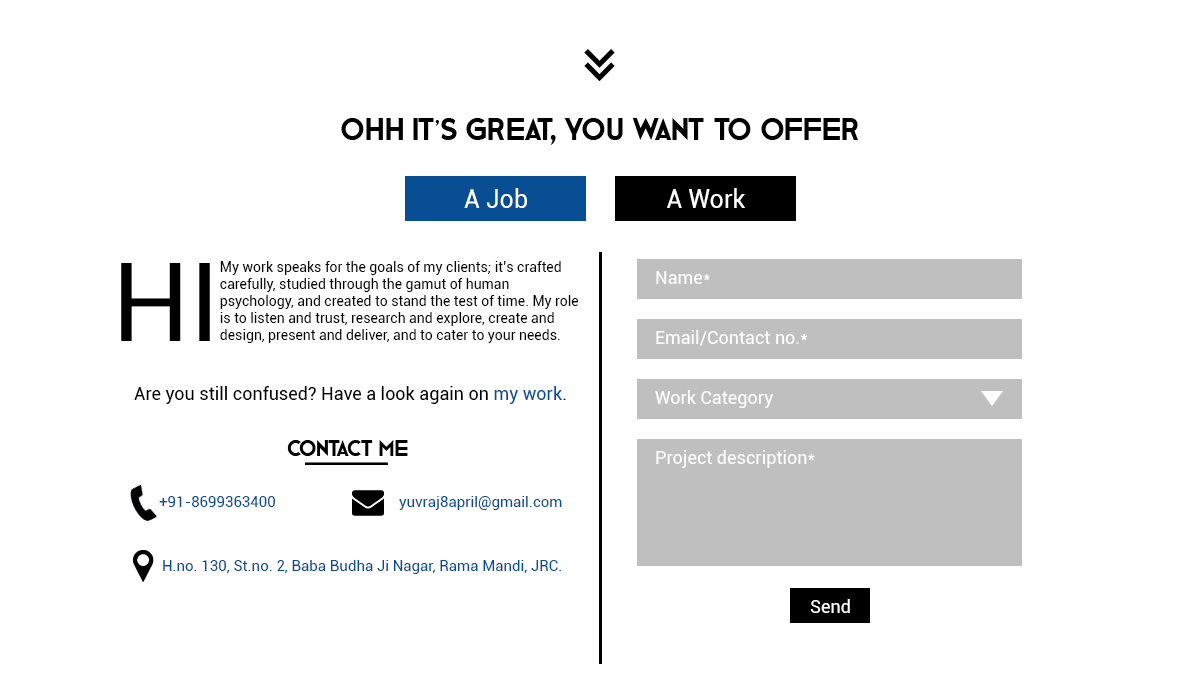
<style>
.page{position:relative;width:1200px;height:700px;background:#ffffff}
.page>*{position:absolute;margin:0}
.t1{font:32px "GeBody";color:#000000}
.t2{font:25px "Roboto-Regular";color:#ffffff}
.t3{font:109.8px "Roboto-Regular";color:#000000}
.t4{font:14px "Roboto-Regular";color:#000000}
.t5{font:18px "Roboto-Regular";color:#ffffff}
.t6{font:18px "Roboto-Regular";color:#000000}
.t7{font:18px "Roboto-Regular";color:#084e93}
.t8{font:22.9px "GeBody";color:#000000}
.t9{font:15px "Roboto-Regular";color:#084e93}
</style>
<div class="page">
<p class="t1" style="left:341px;top:118px;width:517px;height:27px">Ohh it’s great, You want to offer</p>
<p class="t2" style="left:464px;top:188px;width:63px;height:20px">A Job</p>
<p class="t2" style="left:667px;top:188px;width:78px;height:20px">A Work</p>
<p class="t3" style="left:121px;top:263px;width:89px;height:78px">HI</p>
<p class="t4" style="left:220px;top:261px;width:359px;height:82px">My work speaks for the goals of my clients; it’s crafted <br>carefully, studied through the gamut of human <br>psychology, and created to stand the test of time. My role is to listen and trust, research and explore, create and design, present and deliver, and to cater to your needs.</p>
<p class="t5" style="left:656px;top:271px;width:54px;height:13px">Name*</p>
<p class="t5" style="left:656px;top:330px;width:152px;height:16px">Email/Contact no.*</p>
<p class="t6" style="left:134px;top:386px;width:432px;height:18px">Are you still confused? Have a look again on <span class="t7">my work</span>.</p>
<p class="t5" style="left:655px;top:390px;width:118px;height:18px">Work Category</p>
<p class="t8" style="left:287px;top:440px;width:121px;height:16px">contact me</p>
<p class="t5" style="left:656px;top:450px;width:159px;height:18px">Project description*</p>
<p class="t9" style="left:159px;top:496px;width:116px;height:11px">+91-8699363400</p>
<p class="t9" style="left:399px;top:496px;width:163px;height:14px">yuvraj8april@gmail.com</p>
<p class="t9" style="left:163px;top:560px;width:398px;height:14px">H.no. 130, St.no. 2, Baba Budha Ji Nagar, Rama Mandi, JRC.</p>
<p class="t5" style="left:810px;top:599px;width:40px;height:14px">Send</p>
</div>
